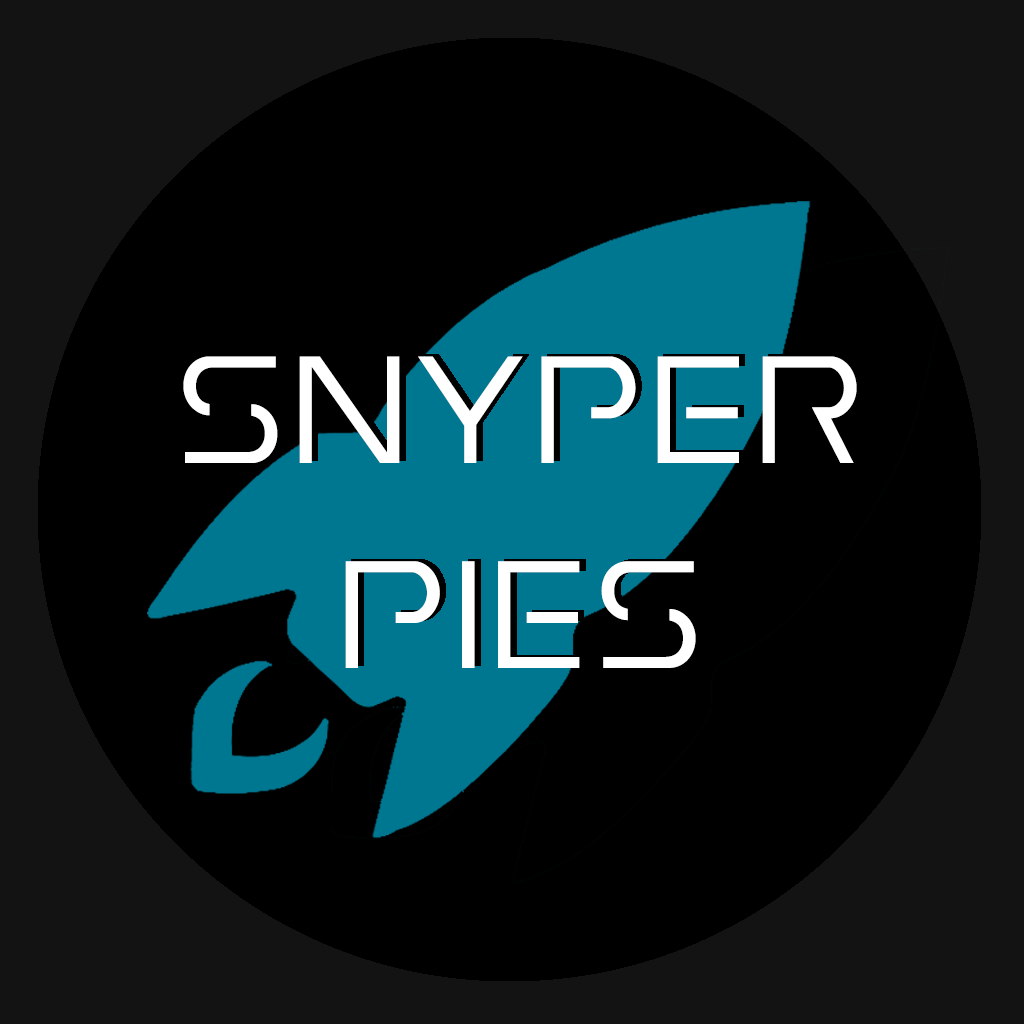
<style>
.page{position:relative;width:1024px;height:1024px;background:#000000}
.page>*{position:absolute;margin:0}
.t1{font:170.7px "EarthOrbiter";color:#ffffff}
</style>
<div class="page">
<p class="t1" style="left:183px;top:356px;width:674px;height:312px;text-align:center">Snyper<br>Pies</p>
</div>
